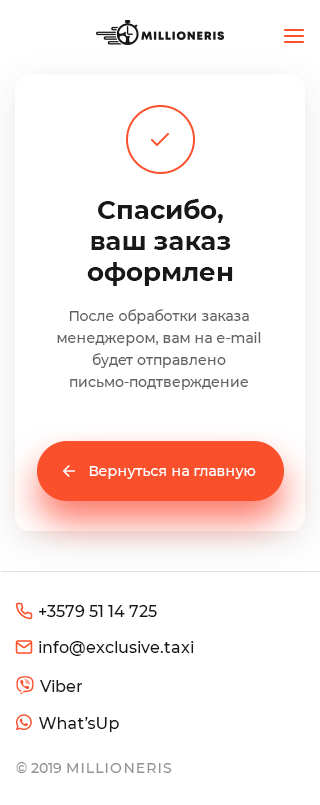
<style>
.page{position:relative;width:320px;height:805px;background:#ffffff}
.page>*{position:absolute;margin:0}
.t1{font:26px "Montserrat-Bold";color:#171919}
.t2{font:14px/22px "Montserrat-Medium";color:#616161}
.t3{font:14px "Montserrat-Medium";color:#ffffff}
.t4{font:16px "Montserrat-Medium";color:#171919}
.t5{font:14px "Montserrat-Medium";letter-spacing:0.1em;color:#929292}
.t6{font:14px "Montserrat-Medium";color:#929292}
</style>
<div class="page">
<p class="t1" style="left:87px;top:198px;width:146px;height:88px;text-align:center">Спасибо,<br>ваш заказ<br>оформлен</p>
<p class="t2" style="left:57px;top:309px;width:204px;height:81px;text-align:center">После обработки заказа менеджером, вам на e-mail <br>будет отправлено письмо-подтверждение</p>
<p class="t3" style="left:89px;top:466px;width:167px;height:13px">Вернуться на главную</p>
<p class="t4" style="left:39px;top:605px;width:118px;height:12px">+3579 51 14 725</p>
<p class="t4" style="left:39px;top:641px;width:155px;height:15px">info@exclusive.taxi</p>
<p class="t5" style="left:16px;top:762px;width:156px;height:11px"><span class="t6">© 2019 </span>MILLIONERIS</p>
</div>
